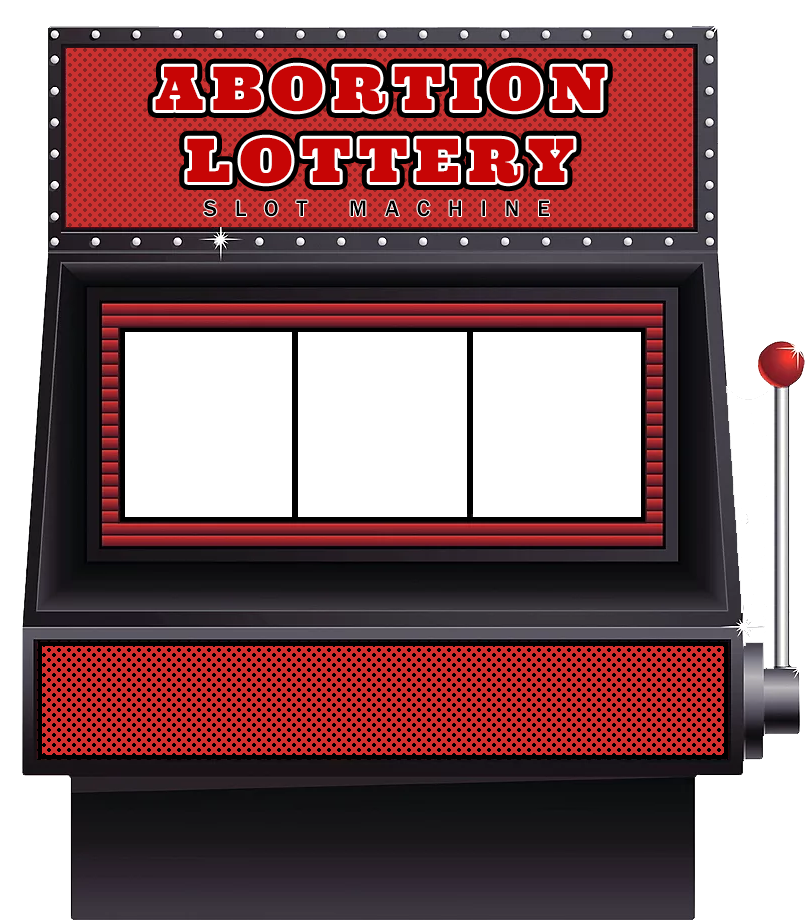
<style>
.page{position:relative;width:809px;height:920px;background:#ffffff}
.page>*{position:absolute;margin:0}
.t1{font:60px "Ultra-Regular";letter-spacing:0.14em;color:#c70505;text-transform:uppercase}
.t2{font:23.3px "FranklinGothic-Medium";letter-spacing:0.76em;color:#000000;text-transform:uppercase}
</style>
<div class="page">
<p class="t1" style="left:155px;top:65px;width:450px;height:119px;text-align:center">abortion lottery</p>
<p class="t2" style="left:203px;top:200px;width:346px;height:17px">slot machine</p>
</div>
